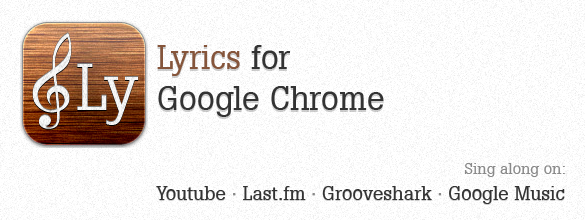
<style>
.page{position:relative;width:585px;height:220px;background:#ffffff}
.page>*{position:absolute;margin:0}
.t1{font:34px "Boton-Regular";color:#333333}
.t2{font:34px "Boton-Regular";color:#85553b}
.t3{font:16px "Boton-Regular";color:#898989}
.t4{font:20px "Boton-Regular";color:#333333}
.t5{font:20px "Boton-Regular";color:#898989}
</style>
<div class="page">
<p class="t1" style="left:157px;top:45px;width:227px;height:72px"><span class="t2">Lyrics</span> for <br>Google Chrome</p>
<p class="t3" style="left:464px;top:163px;width:101px;height:14px">Sing along on:</p>
<p class="t4" style="left:156px;top:186px;width:409px;height:18px">Youtube <span class="t5">·</span> Last.fm <span class="t5">· </span>Grooveshark <span class="t5">·</span> Google Music</p>
</div>
